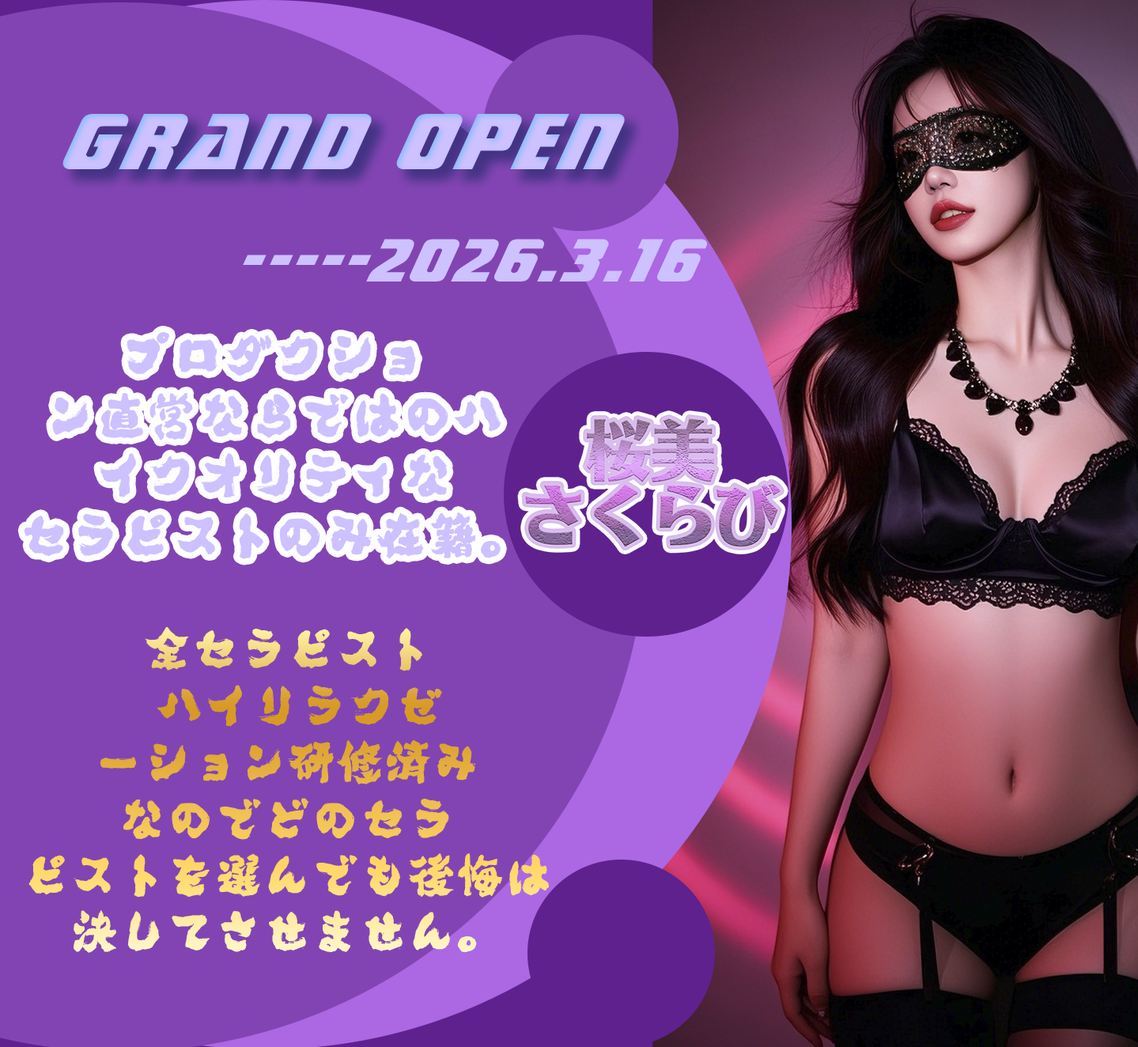
<style>
.page{position:relative;width:1138px;height:1047px;background:#8244b3}
.page>*{position:absolute;margin:0}
.t1{font:84px "241-CAI978";letter-spacing:0.025em;color:#cdc1ff}
.t2{font:64.1px "241-CAI978";letter-spacing:0.025em;color:#cdc1ff}
.t3{font:49.9px "Konshin";letter-spacing:0.025em;color:#cdc1ff}
.t4{font:47.1px "Konshin";letter-spacing:0.025em}
</style>
<div class="page">
<p class="t1" style="left:62px;top:114px;width:563px;height:55px">GRAND OPEN</p>
<p class="t2" style="left:243px;top:239px;width:464px;height:43px">-----2026.3.16</p>
<p class="t3" style="left:24px;top:332px;width:478px;height:227px;text-align:center">プロダクショ<br>ン直営ならではのハ<br>イクオリティな<br>セラピストのみ在籍。</p>
<p class="t4" style="left:28px;top:627px;width:521px;height:326px;text-align:center">全セラピスト<br> ハイリラクゼ<br>ーション研修済み<br>なのでどのセラ<br>ピストを選んでも後悔は<br>決してさせません。</p>
</div>
